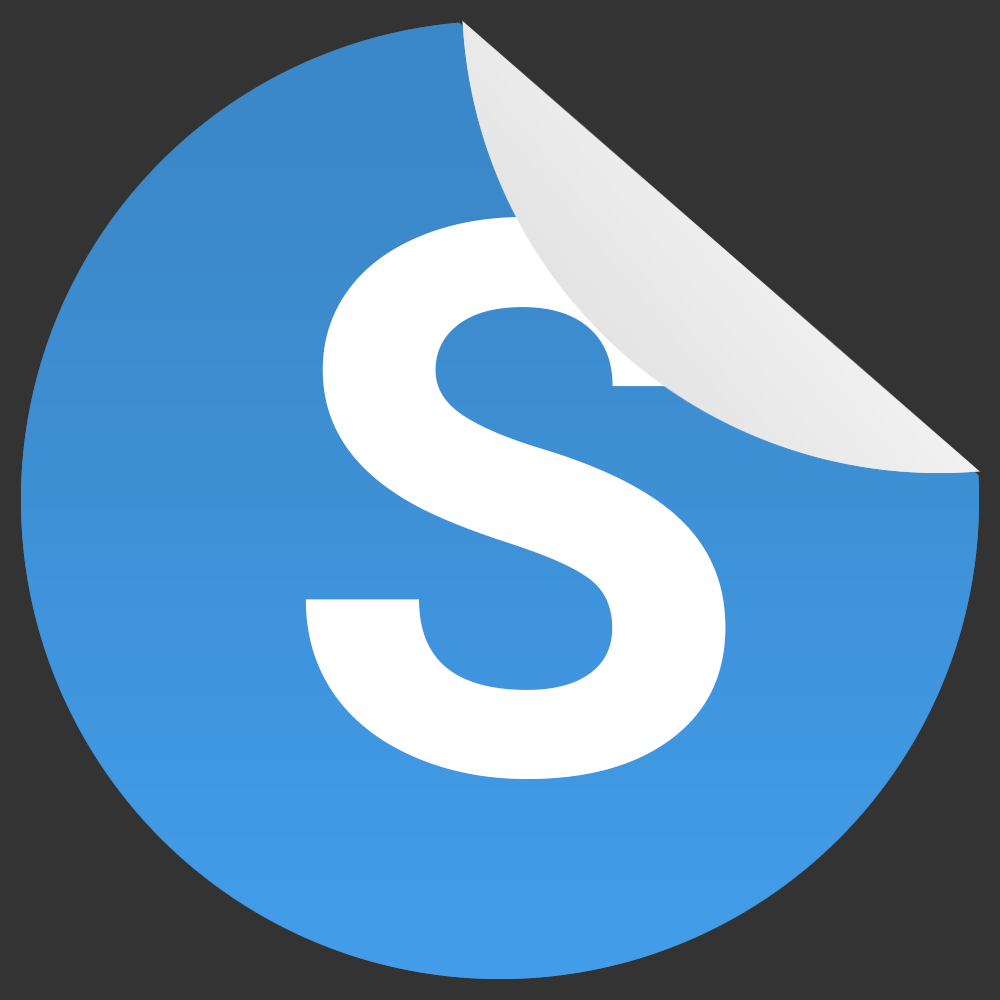
<style>
.page{position:relative;width:1000px;height:1000px;background:#333333}
.page>*{position:absolute;margin:0}
.t1{font:768.8px "Roboto-Bold";color:#ffffff}
</style>
<div class="page">
<p class="t1" style="left:305px;top:217px;width:421px;height:562px">S</p>
</div>
